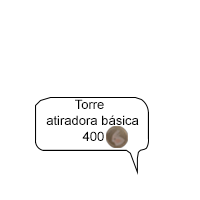
<style>
.page{position:relative;width:200px;height:200px;background:#ffffff}
.page>*{position:absolute;margin:0}
.t1{font:13px "ArialMT";color:#000000}
</style>
<div class="page">
<p class="t1" style="left:46px;top:99px;width:93px;height:42px;text-align:center">Torre atiradora básica <br>400</p>
</div>
